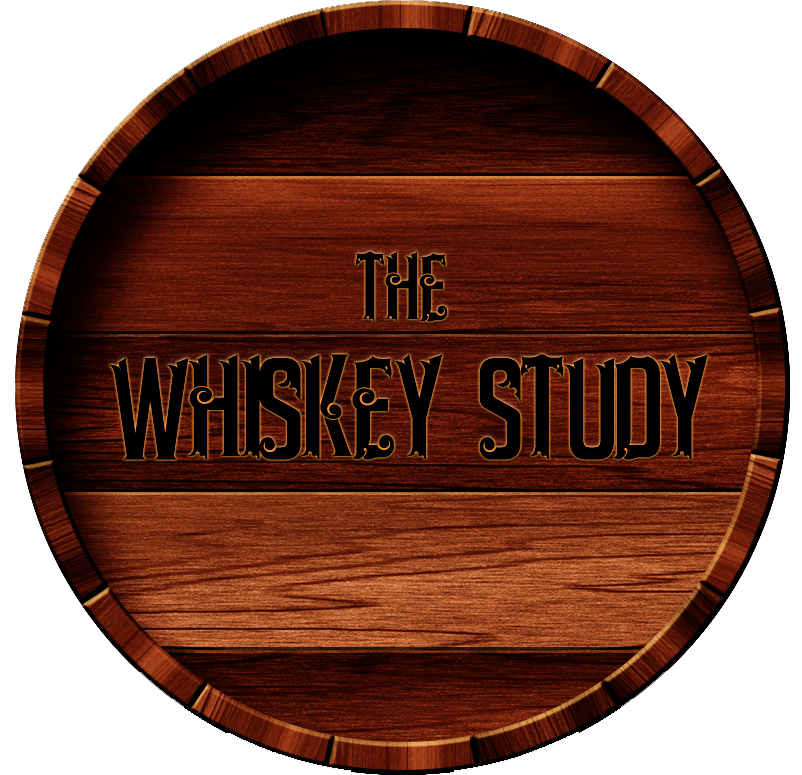
<style>
.page{position:relative;width:802px;height:775px;background:#ffffff}
.page>*{position:absolute;margin:0}
.t1{font:100px "Whiskey";color:#000000}
.t2{font:150px "Whiskey";color:#000000}
</style>
<div class="page">
<p class="t1" style="left:355px;top:251px;width:93px;height:71px">THE</p>
<p class="t2" style="left:109px;top:354px;width:599px;height:106px">WHISKEY STUDY</p>
</div>
